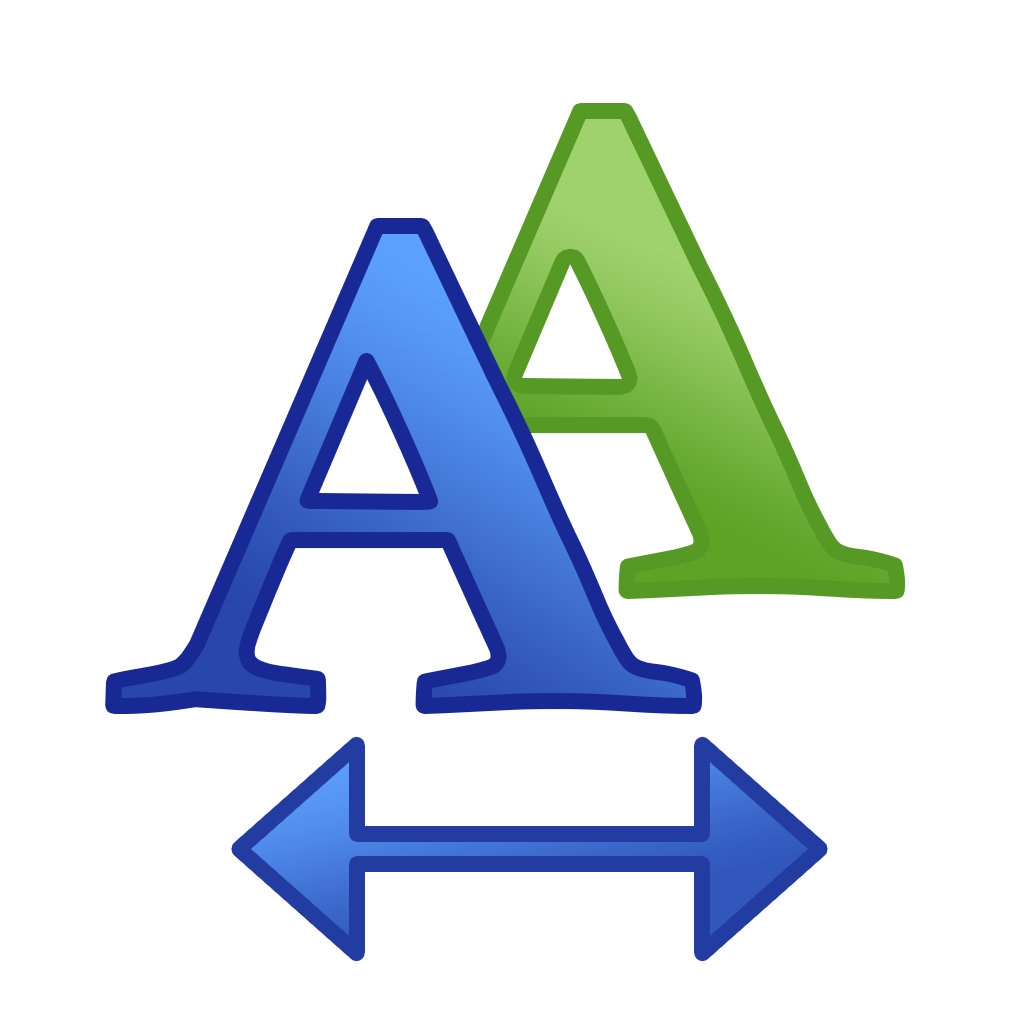
<style>
.page{position:relative;width:1024px;height:1024px;background:#ffffff}
.page>*{position:absolute;margin:0}
.t1{font:745.8px "Garamond-Bold";letter-spacing:-0.025em;scale:1.13 1}
</style>
<div class="page">
<p class="t1" style="left:113px;top:226px;width:582px;height:480px">A</p>
</div>
